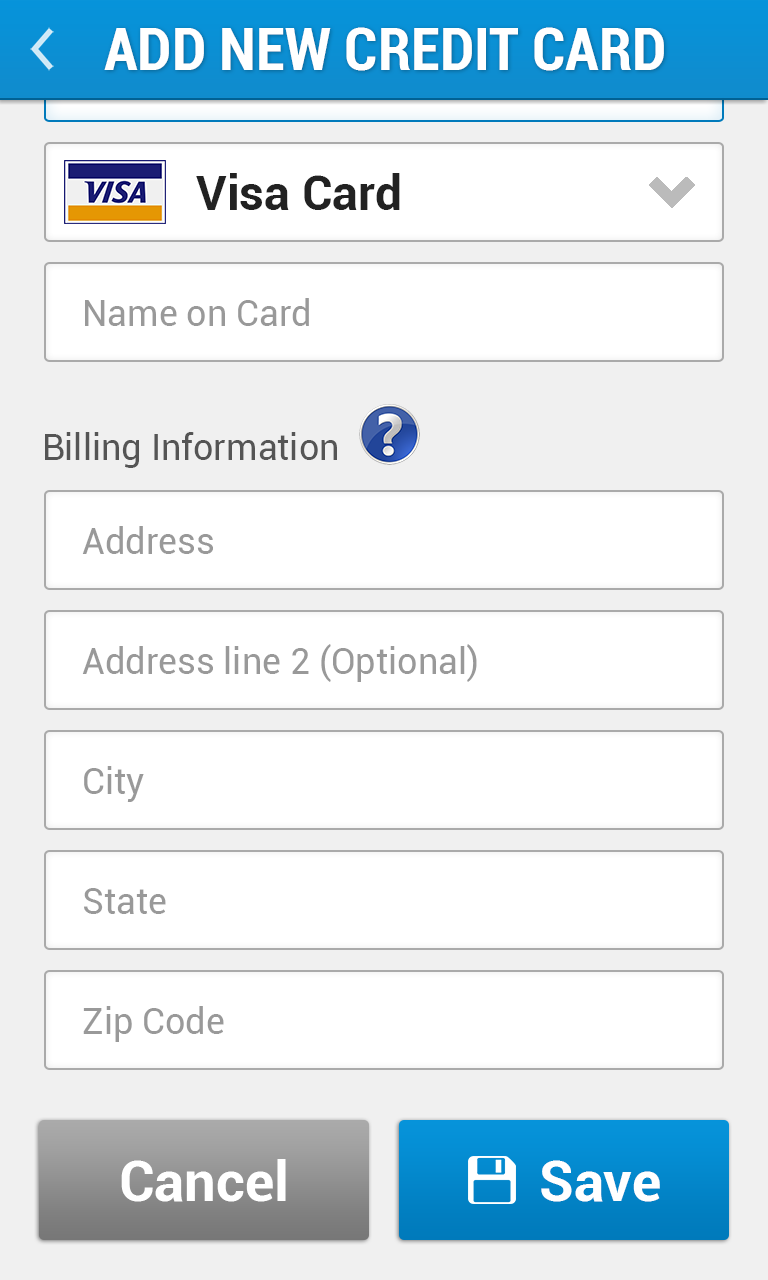
<style>
.page{position:relative;width:768px;height:1280px;background:#ffffff}
.page>*{position:absolute;margin:0}
.t1{font:60px "Roboto-BoldCondensed";color:#ffffff}
.t2{font:48px "Roboto-Bold";color:#222222}
.t3{font:36px "Roboto-Regular";color:#999999}
.t4{font:36px "Roboto-Regular";color:#555555}
.t5{font:56px "Roboto-Bold";color:#ffffff}
</style>
<div class="page">
<p class="t1" style="left:104px;top:27px;width:560px;height:44px">ADD NEW CREDIT CARD</p>
<p class="t2" style="left:196px;top:173px;width:204px;height:37px">Visa Card</p>
<p class="t3" style="left:85px;top:298px;width:224px;height:28px">Name on Card</p>
<p class="t4" style="left:45px;top:432px;width:292px;height:36px">Billing Information</p>
<p class="t3" style="left:82px;top:526px;width:131px;height:28px">Address</p>
<p class="t3" style="left:82px;top:644px;width:395px;height:38px">Address line 2 (Optional)</p>
<p class="t3" style="left:84px;top:766px;width:60px;height:36px">City</p>
<p class="t3" style="left:84px;top:888px;width:82px;height:26px">State</p>
<p class="t3" style="left:83px;top:1006px;width:141px;height:36px">Zip Code</p>
<p class="t5" style="left:121px;top:1159px;width:165px;height:43px">Cancel</p>
<p class="t5" style="left:541px;top:1160px;width:119px;height:42px">Save</p>
</div>
